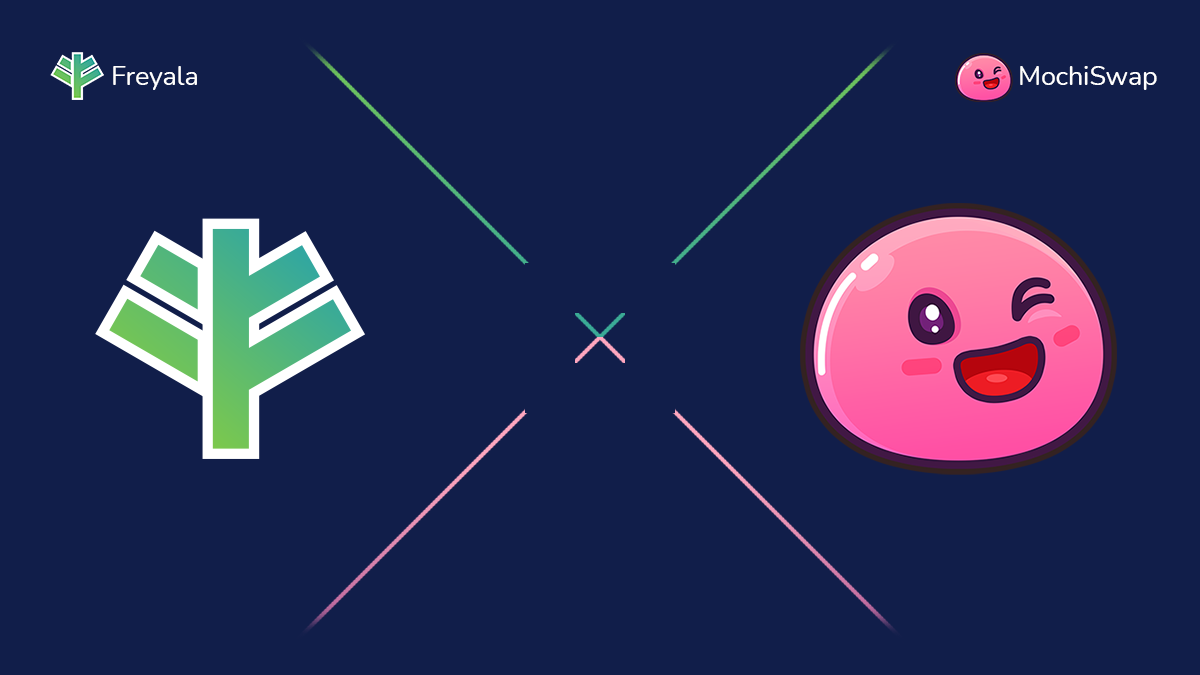
<style>
.page{position:relative;width:1200px;height:675px;background:#111e4a}
.page>*{position:absolute;margin:0}
.t1{font:26.7px "Nunito-Regular";color:#ffffff}
</style>
<div class="page">
<p class="t1" style="left:113px;top:66px;width:84px;height:24px">Freyala</p>
<p class="t1" style="left:1020px;top:66px;width:137px;height:24px">MochiSwap</p>
</div>
